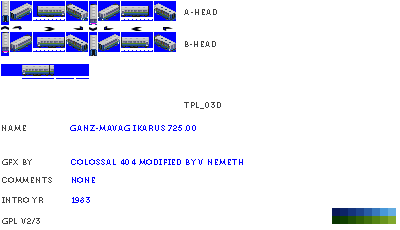
<style>
.page{position:relative;width:400px;height:230px;background:#ffffff}
.page>*{position:absolute;margin:0}
.t1{font:8px "Museo700-Regular";letter-spacing:0.075em;color:#404040;text-transform:uppercase}
.t2{font:8px "Museo700-Regular";letter-spacing:0.075em;color:#0000ff;text-transform:uppercase}
</style>
<div class="page">
<p class="t1" style="left:184px;top:9px;width:33px;height:6px">a-head</p>
<p class="t1" style="left:185px;top:41px;width:31px;height:6px">b-head</p>
<p class="t1" style="left:184px;top:102px;width:37px;height:7px">tpl_03d</p>
<p class="t1" style="left:2px;top:125px;width:24px;height:6px">name</p>
<p class="t2" style="left:70px;top:125px;width:126px;height:6px">ganz-mavag ikarus 725.00</p>
<p class="t1" style="left:2px;top:159px;width:30px;height:6px">gfx by</p>
<p class="t2" style="left:71px;top:159px;width:172px;height:6px">colossal 404 modified by v nemeth</p>
<p class="t1" style="left:2px;top:177px;width:50px;height:6px">comments</p>
<p class="t2" style="left:72px;top:177px;width:23px;height:6px">none</p>
<p class="t1" style="left:2px;top:197px;width:41px;height:6px">intro yr</p>
<p class="t2" style="left:72px;top:197px;width:18px;height:6px">1983</p>
<p class="t1" style="left:2px;top:218px;width:38px;height:6px">gpl v2/3</p>
</div>
